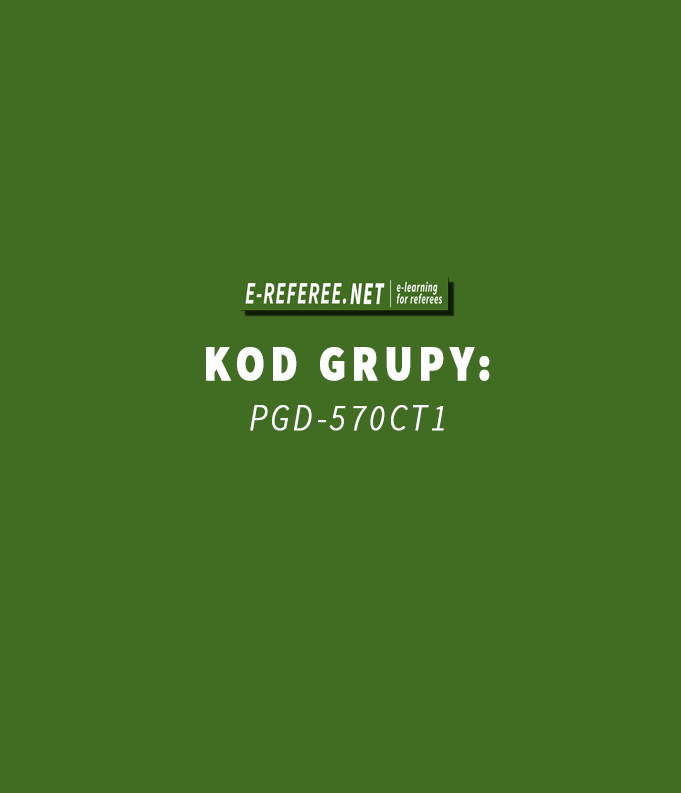
<style>
.page{position:relative;width:681px;height:793px;background:#416d23}
.page>*{position:absolute;margin:0}
.t1{font:49.1px/50px "SourceSansPro-Black";letter-spacing:0.12em;color:#ffffff;font-weight:bold;scale:0.85 1}
.t2{font:37.4px/50px "SourceSansPro-LightIt";letter-spacing:0.12em;color:#ffffff;font-weight:bold;scale:0.85 1}
</style>
<div class="page">
<p class="t1" style="left:206px;top:347px;width:284px;height:84px;text-align:center">KOD GRUPY:<br><span class="t2">PGD-570CT1</span></p>
</div>
